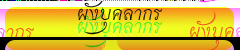
<style>
.page{position:relative;width:240px;height:50px}
.page>*{position:absolute;margin:0}
.t1{font:28px "THCharmonman"}
</style>
<div class="page">
<p class="t1" style="left:78px;top:6px;width:84px;height:42px">ผังบุคลากร</p>
</div>
